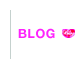
<style>
.page{position:relative;width:83px;height:65px;background:#ffffff}
.page>*{position:absolute;margin:0}
.t1{font:12.5px "HelveticaNeue-Bold";letter-spacing:0.05em;color:#fe22fd}
</style>
<div class="page">
<p class="t1" style="left:18px;top:28px;width:37px;height:11px">BLOG</p>
</div>
